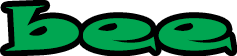
<style>
.page{position:relative;width:237px;height:56px;background:#00a651}
.page>*{position:absolute;margin:0}
.t1{font:60px "SnapITC-Regular";color:#00a651;scale:2 1}
</style>
<div class="page">
<p class="t1" style="left:5px;top:5px;width:227px;height:46px">bee</p>
</div>
